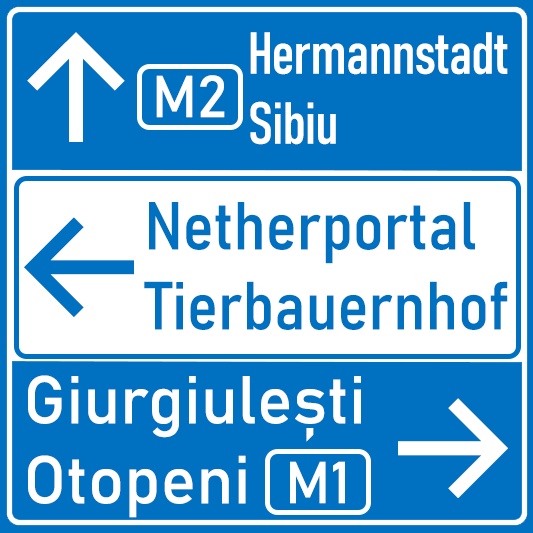
<style>
.page{position:relative;width:533px;height:533px;background:#0070c0}
.page>*{position:absolute;margin:0}
.t1{font:150px "Inter-Medium";color:#ffffff}
.t2{font:58.3px "Bahnschrift-Condensed";letter-spacing:-0.02em;color:#ffffff}
.t3{font:58.3px "Bahnschrift";color:#ffffff}
.t4{font:66.7px "Bahnschrift-SemiCondensed";color:#0070c0}
.t5{font:150px "Inter-Medium";color:#0070c0}
.t6{font:66.7px "Bahnschrift";color:#ffffff}
</style>
<div class="page">
<p class="t1" style="left:27px;top:32px;width:98px;height:110px">↑</p>
<p class="t2" style="left:250px;top:32px;width:258px;height:113px">Hermannstadt<br>Sibiu</p>
<p class="t3" style="left:156px;top:75px;width:69px;height:43px">M2</p>
<p class="t4" style="left:144px;top:202px;width:364px;height:128px">Netherportal<br>Tierbauernhof</p>
<p class="t5" style="left:24px;top:217px;width:110px;height:100px">←</p>
<p class="t6" style="left:28px;top:375px;width:333px;height:143px">Giurgiulești<br>Otopeni</p>
<p class="t1" style="left:398px;top:398px;width:110px;height:100px">→</p>
<p class="t3" style="left:290px;top:461px;width:55px;height:43px">M1</p>
</div>
